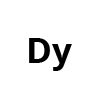
<style>
.page{position:relative;width:100px;height:100px;background:#ffffff}
.page>*{position:absolute;margin:0}
.t1{font:35px "OpenSans-Bold";color:#000000}
</style>
<div class="page">
<p class="t1" style="left:29px;top:38px;width:43px;height:33px">Dy</p>
</div>
